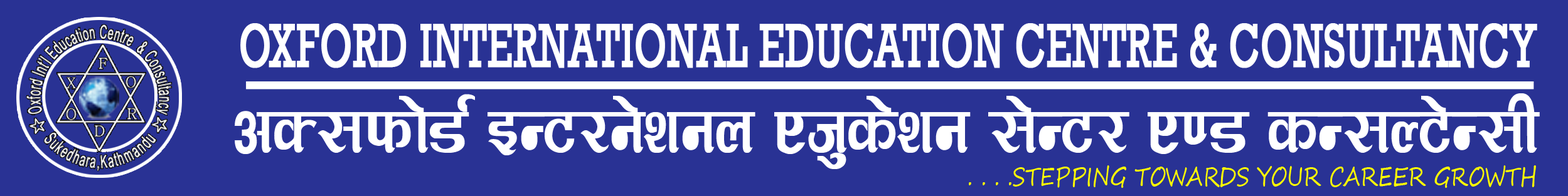
<style>
.page{position:relative;width:1568px;height:196px;background:#293294}
.page>*{position:absolute;margin:0}
.t1{font:62.9px "Rockwell";color:#ffffff;font-weight:bold;scale:0.64 1}
.t2{font:83.8px "RangilaPlain";color:#ffffff;scale:0.78 1}
.t3{font:26.2px "SegoeScript";color:#fffc00;scale:0.78 1}
</style>
<div class="page">
<p class="t1" style="left:240px;top:23px;width:1297px;height:45px">OXFORD INTERNATIONAL EDUCATION CENTRE &amp; CONSULTANCY</p>
<p class="t2" style="left:235px;top:93px;width:1305px;height:76px">cS;kmf]8{ OG6/g]zgn Ph's]zg ;]G6/ P08 sG;N6]G;L</p>
<p class="t3" style="left:969px;top:166px;width:567px;height:22px">. . . .STEPPING TOWARDS YOUR CAREER GROWTH</p>
</div>
